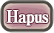
<style>
.page{position:relative;width:54px;height:33px}
.page>*{position:absolute;margin:0}
.t1{font:17px "RyuminPro-ExBold";letter-spacing:-0.08em;color:#ffffff;font-weight:bold;scale:0.9 1}
</style>
<div class="page">
<p class="t1" style="left:6px;top:10px;width:43px;height:16px">Hapus</p>
</div>
